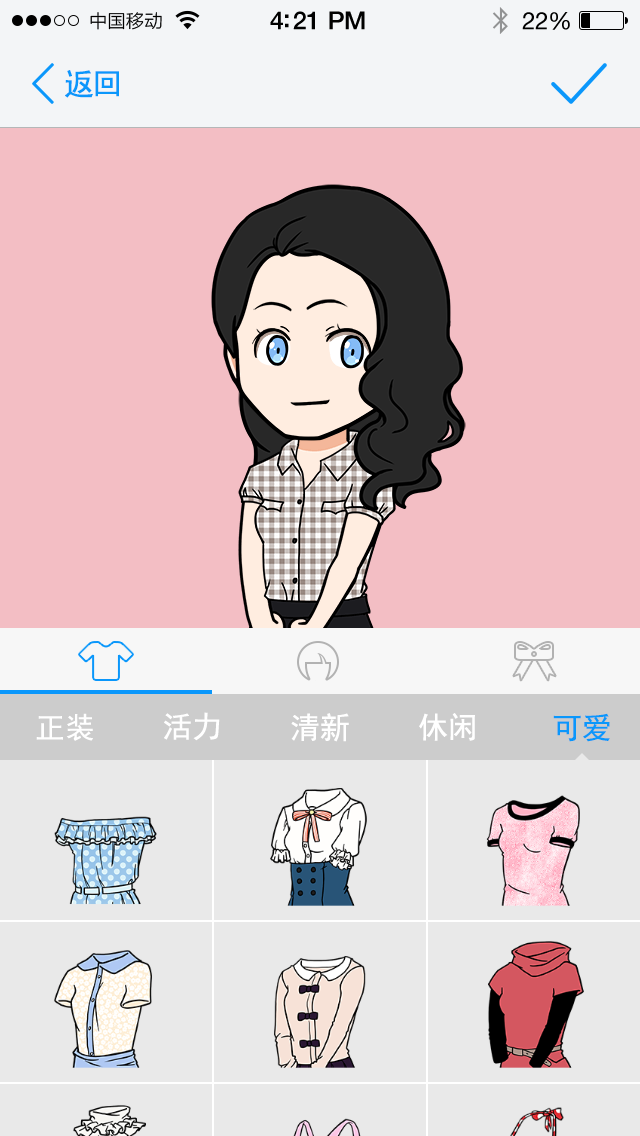
<style>
.page{position:relative;width:640px;height:1136px;background:#f3bec4}
.page>*{position:absolute;margin:0}
.t1{font:30px "SimHei";letter-spacing:-0.075em;color:#0a97fb;font-weight:bold}
.t2{font:30px "SimHei";letter-spacing:-0.01em;color:#ffffff}
.t3{font:30px "SimHei";letter-spacing:-0.01em;color:#0a97fb}
</style>
<div class="page">
<p class="t1" style="left:65px;top:70px;width:54px;height:28px">返回</p>
<p class="t2" style="left:36px;top:713px;width:57px;height:28px">正装</p>
<p class="t2" style="left:36px;top:713px;width:57px;height:28px">正装</p>
<p class="t2" style="left:36px;top:713px;width:57px;height:28px">正装</p>
<p class="t2" style="left:36px;top:713px;width:57px;height:28px">正装</p>
<p class="t2" style="left:36px;top:713px;width:57px;height:28px">正装</p>
<p class="t2" style="left:164px;top:712px;width:56px;height:29px">活力</p>
<p class="t2" style="left:164px;top:712px;width:56px;height:29px">活力</p>
<p class="t2" style="left:164px;top:712px;width:56px;height:29px">活力</p>
<p class="t2" style="left:164px;top:712px;width:56px;height:29px">活力</p>
<p class="t2" style="left:164px;top:712px;width:56px;height:29px">活力</p>
<p class="t2" style="left:291px;top:713px;width:58px;height:29px">清新</p>
<p class="t2" style="left:291px;top:713px;width:58px;height:29px">清新</p>
<p class="t2" style="left:291px;top:713px;width:58px;height:29px">清新</p>
<p class="t2" style="left:291px;top:713px;width:58px;height:29px">清新</p>
<p class="t2" style="left:291px;top:713px;width:58px;height:29px">清新</p>
<p class="t2" style="left:419px;top:713px;width:56px;height:28px">休闲</p>
<p class="t2" style="left:419px;top:713px;width:56px;height:28px">休闲</p>
<p class="t2" style="left:419px;top:713px;width:56px;height:28px">休闲</p>
<p class="t2" style="left:419px;top:713px;width:56px;height:28px">休闲</p>
<p class="t2" style="left:419px;top:713px;width:56px;height:28px">休闲</p>
<p class="t3" style="left:553px;top:713px;width:57px;height:29px">可爱</p>
<p class="t3" style="left:553px;top:713px;width:57px;height:29px">可爱</p>
<p class="t3" style="left:553px;top:713px;width:57px;height:29px">可爱</p>
<p class="t3" style="left:553px;top:713px;width:57px;height:29px">可爱</p>
<p class="t3" style="left:553px;top:713px;width:57px;height:29px">可爱</p>
</div>
